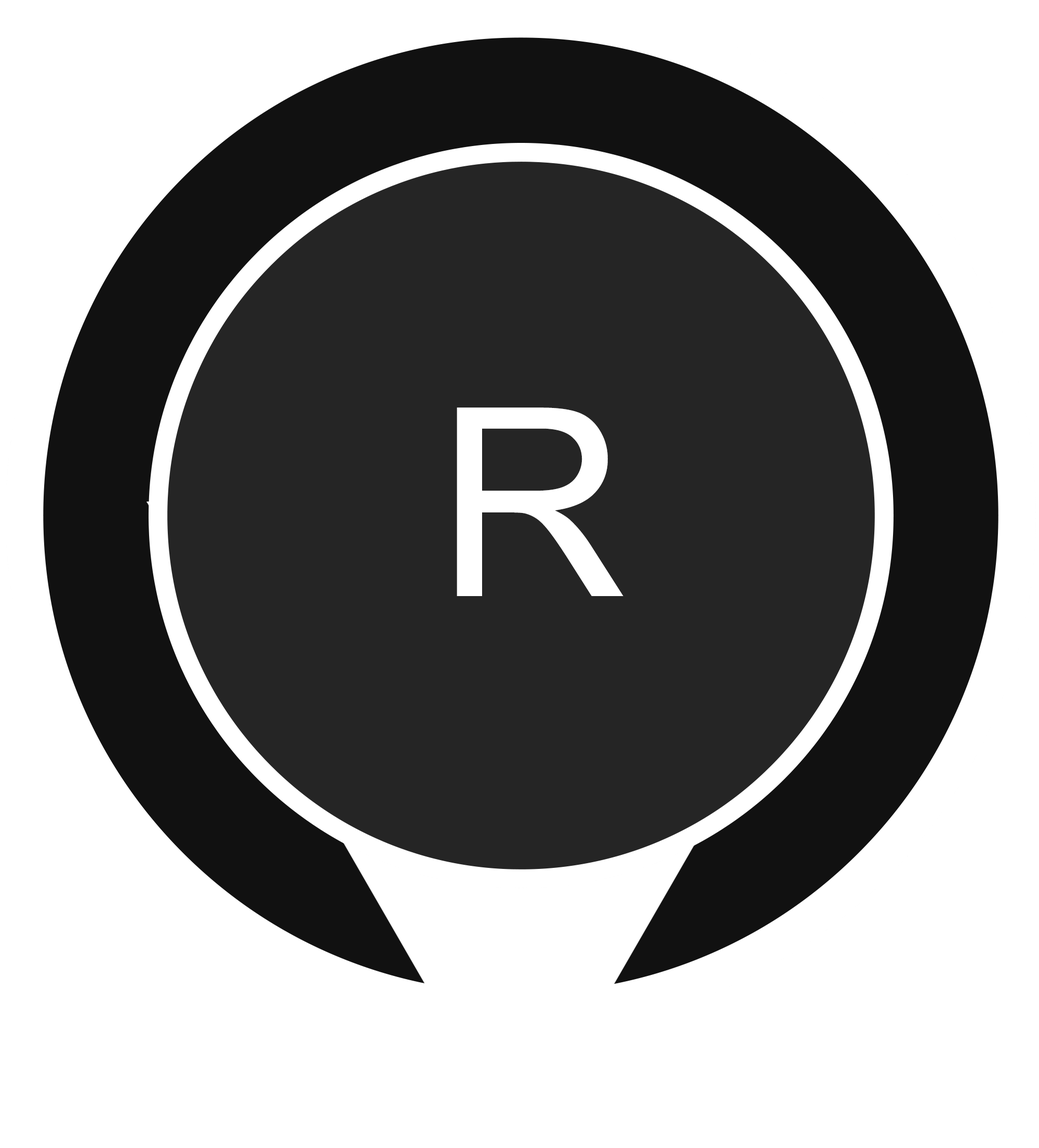
<style>
.page{position:relative;width:1039px;height:1148px;background:#ffffff}
.page>*{position:absolute;margin:0}
.t1{font:263px "ArialMT";color:#ffffff}
</style>
<div class="page">
<p class="t1" style="left:457px;top:407px;width:166px;height:189px">R</p>
</div>
